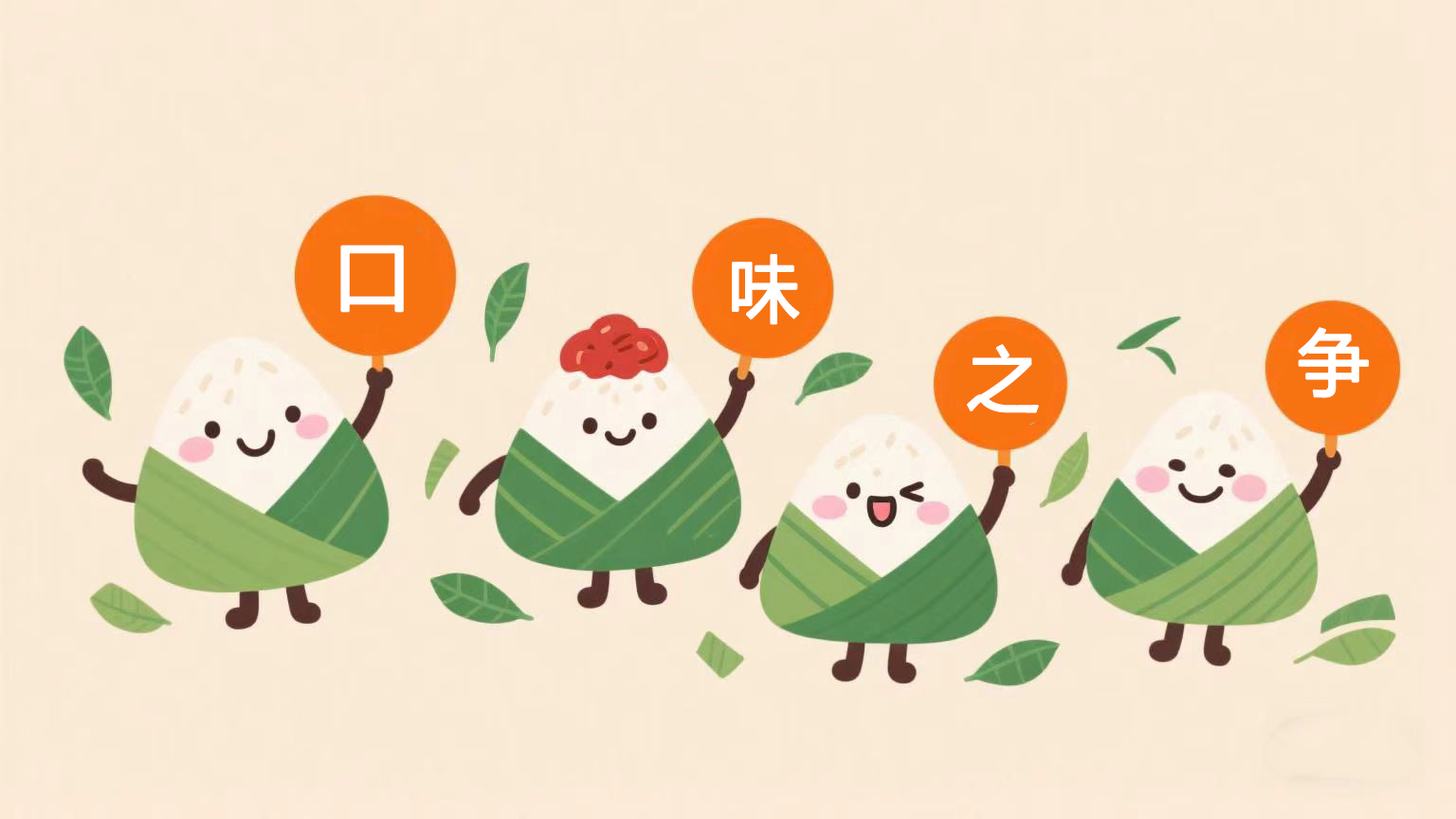
<style>
.page{position:relative;width:1456px;height:819px;background:#f9ead5}
.page>*{position:absolute;margin:0}
.t1{font:78.2px "MicrosoftYaHei";letter-spacing:0.005em;color:#ffffff;text-transform:uppercase;font-weight:bold}
.t2{font:71.1px "MicrosoftYaHei";letter-spacing:0.005em;color:#ffffff;text-transform:uppercase;font-weight:bold}
</style>
<div class="page">
<p class="t1" style="left:340px;top:245px;width:64px;height:68px">口</p>
<p class="t2" style="left:732px;top:254px;width:68px;height:71px">味</p>
<p class="t2" style="left:1298px;top:327px;width:71px;height:71px">争</p>
<p class="t2" style="left:967px;top:344px;width:72px;height:69px">之</p>
</div>
